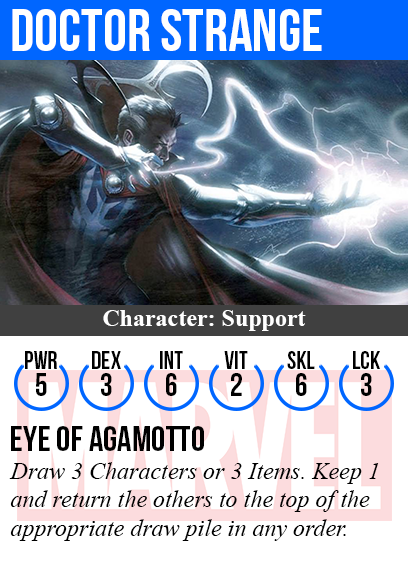
<style>
.page{position:relative;width:408px;height:585px;background:#ffffff}
.page>*{position:absolute;margin:0}
.t1{font:60px "BebasNeue";color:#ffffff}
.t2{font:24px "TimesNewRomanPS-BoldMT";color:#ffffff}
.t3{font:25px "BebasNeue";color:#000000}
.t4{font:32px "BebasNeue";color:#000000}
.t5{font:36px "BebasNeue";color:#000000}
.t6{font:24px "TimesNewRomanPS-ItalicMT";color:#000000}
</style>
<div class="page">
<p class="t1" style="left:12px;top:9px;width:310px;height:42px">doctor strange</p>
<p class="t2" style="left:103px;top:310px;width:203px;height:21px">Character: Support</p>
<p class="t3" style="left:25px;top:351px;width:32px;height:18px">PWR</p>
<p class="t3" style="left:92px;top:351px;width:29px;height:18px">dex</p>
<p class="t3" style="left:160px;top:351px;width:23px;height:18px">int</p>
<p class="t3" style="left:224px;top:351px;width:24px;height:18px">vit</p>
<p class="t3" style="left:287px;top:351px;width:28px;height:18px">skl</p>
<p class="t3" style="left:353px;top:351px;width:27px;height:18px">lck</p>
<p class="t4" style="left:36px;top:373px;width:11px;height:23px">5</p>
<p class="t4" style="left:101px;top:373px;width:11px;height:23px">3</p>
<p class="t4" style="left:166px;top:373px;width:11px;height:23px">6</p>
<p class="t4" style="left:231px;top:373px;width:11px;height:23px">2</p>
<p class="t4" style="left:296px;top:373px;width:11px;height:23px">6</p>
<p class="t4" style="left:361px;top:373px;width:11px;height:23px">3</p>
<p class="t5" style="left:11px;top:426px;width:193px;height:25px">eye of agamotto</p>
<p class="t6" style="left:9px;top:462px;width:370px;height:79px">Draw 3 Characters or 3 Items. Keep 1<br>and return the others to the top of the<br>appropriate draw pile in any order.</p>
</div>
